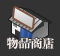
<style>
.page{position:relative;width:60px;height:56px;background:#333333}
.page>*{position:absolute;margin:0}
.t1{font:12px "RyuminPr6N-ExBold";color:#fff6f2}
</style>
<div class="page">
<p class="t1" style="left:7px;top:37px;width:47px;height:12px">物品商店</p>
</div>
